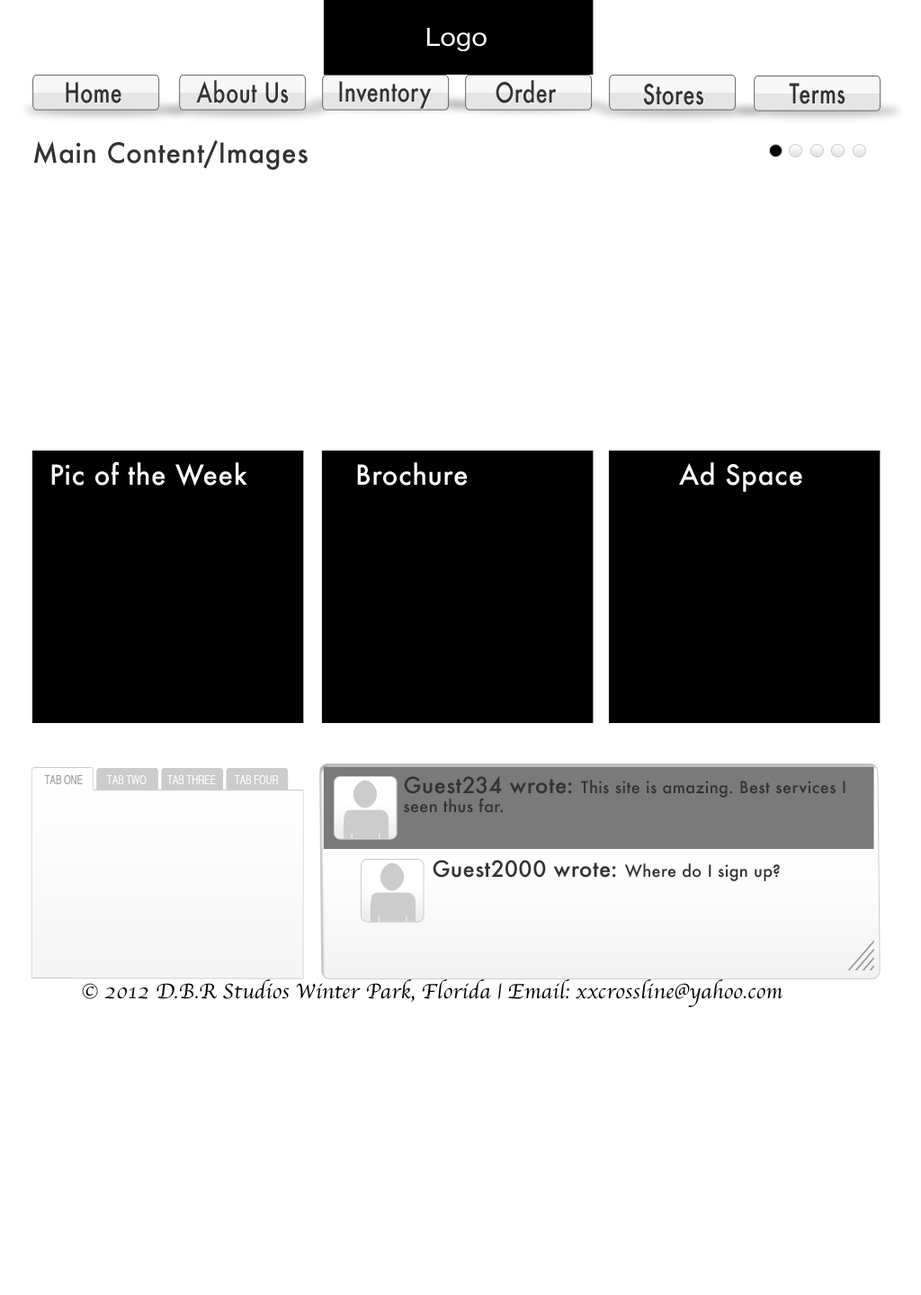
<style>
.page{position:relative;width:921px;height:1295px;background:#ffffff}
.page>*{position:absolute;margin:0}
.t1{font:25.2px "HelveticaNeue";letter-spacing:0.01em;color:#ffffff;scale:1.07 1}
.t2{font:27px "Futura-Medium";letter-spacing:0.02em;color:#333333;scale:0.78 1}
.t3{font:27px "Futura-Medium";letter-spacing:0.02em;color:#333333}
.t4{font:27px "Futura-Medium";letter-spacing:0.02em;color:#ffffff}
.t5{font:16.2px "Futura-Medium";letter-spacing:0.02em;color:#333333}
.t6{font:21.6px "Futura-Medium";letter-spacing:0.02em;color:#333333}
.t7{font:21.6px "Apple-Chancery";letter-spacing:0.01em;color:#000000}
</style>
<div class="page">
<p class="t1" style="left:427px;top:28px;width:60px;height:23px">Logo</p>
<p class="t2" style="left:66px;top:82px;width:55px;height:21px">Home</p>
<p class="t2" style="left:196px;top:80px;width:93px;height:23px">About Us</p>
<p class="t2" style="left:339px;top:81px;width:93px;height:28px">Inventory</p>
<p class="t2" style="left:495px;top:80px;width:62px;height:23px">Order</p>
<p class="t2" style="left:643px;top:84px;width:60px;height:21px">Stores</p>
<p class="t2" style="left:789px;top:83px;width:56px;height:21px">Terms</p>
<p class="t3" style="left:34px;top:140px;width:274px;height:30px">Main Content/Images</p>
<p class="t4" style="left:51px;top:461px;width:196px;height:26px">Pic of the Week</p>
<p class="t4" style="left:357px;top:462px;width:111px;height:24px">Brochure</p>
<p class="t4" style="left:679px;top:462px;width:123px;height:30px">Ad Space</p>
<p class="t5" style="left:404px;top:775px;width:441px;height:38px"><span class="t6">Guest234 wrote: </span>This site is amazing. Best services I <br>seen thus far.</p>
<p class="t5" style="left:433px;top:860px;width:347px;height:21px"><span class="t6">Guest2000 wrote: </span>Where do I sign up?</p>
<p class="t7" style="left:82px;top:979px;width:700px;height:28px">© 2012 D.B.R Studios Winter Park, Florida | Email: xxcrossline@yahoo.com</p>
</div>
